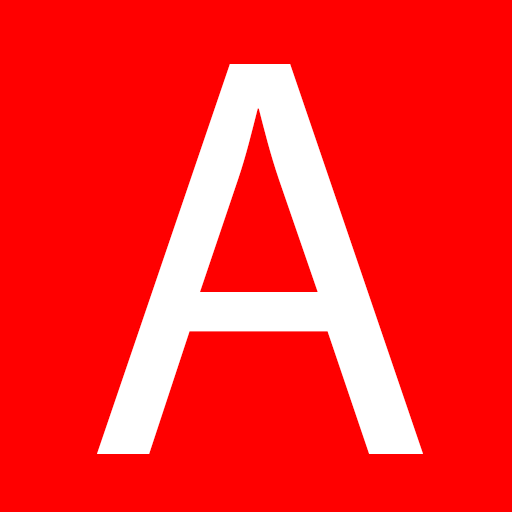
<style>
.page{position:relative;width:512px;height:512px;background:#ff0000}
.page>*{position:absolute;margin:0}
.t1{font:577.9px "MyriadPro-Regular";color:#ffffff}
</style>
<div class="page">
<p class="t1" style="left:97px;top:64px;width:326px;height:390px">A</p>
</div>
